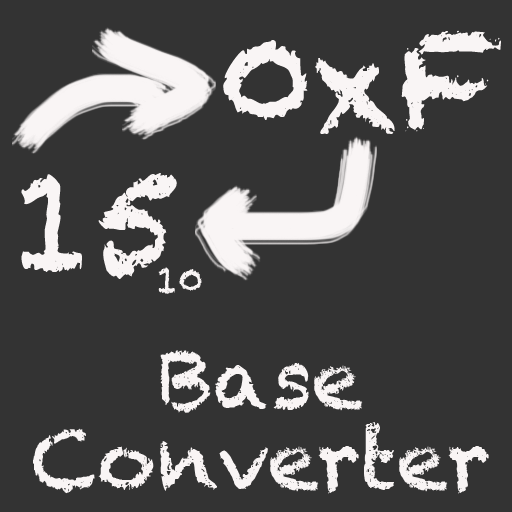
<style>
.page{position:relative;width:512px;height:512px;background:#333333}
.page>*{position:absolute;margin:0}
.t1{font:135.8px "Chalkduster";color:#f9f5f5}
.t2{font:36.2px "Chalkduster";color:#f9f5f5}
.t3{font:81.5px "Chalkduster";color:#f9f5f5}
</style>
<div class="page">
<p class="t1" style="left:223px;top:30px;width:278px;height:104px">0xF</p>
<p class="t1" style="left:21px;top:173px;width:156px;height:106px">15</p>
<p class="t2" style="left:158px;top:267px;width:44px;height:27px">10</p>
<p class="t3" style="left:160px;top:350px;width:203px;height:63px">Base</p>
<p class="t3" style="left:33px;top:422px;width:456px;height:72px">Converter</p>
</div>
